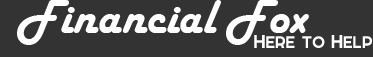
<style>
.page{position:relative;width:373px;height:57px;background:#333333}
.page>*{position:absolute;margin:0}
.t1{font:50px "HarlowSolid";color:#ffffff}
.t2{font:25px "Elkwood";color:#ffffff}
.t3{font:25px "Elkwood";color:#000000}
</style>
<div class="page">
<p class="t1" style="left:17px;top:0px;width:292px;height:45px">Financial Fox</p>
<p class="t2" style="left:254px;top:35px;width:118px;height:13px"><span class="t3"> </span>Here to Help</p>
</div>
